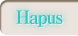
<style>
.page{position:relative;width:78px;height:36px;background:#ebe3dd}
.page>*{position:absolute;margin:0}
.t1{font:18px "RyuminPro-ExBold";letter-spacing:-0.08em;color:#3cc4c0}
</style>
<div class="page">
<p class="t1" style="left:16px;top:10px;width:47px;height:17px">Hapus</p>
</div>
